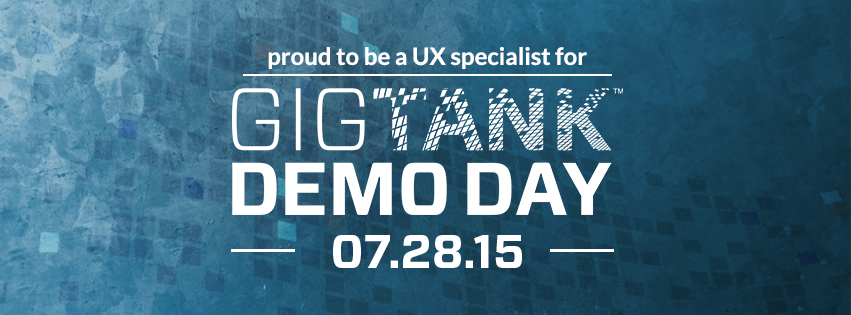
<style>
.page{position:relative;width:851px;height:315px}
.page>*{position:absolute;margin:0}
.t1{font:24px "Lato-Bold";color:#ffffff}
.t2{font:47px "Forza-Bold";color:#ffffff}
</style>
<div class="page">
<p class="t1" style="left:268px;top:47px;width:319px;height:22px">proud to be a UX specialist for</p>
<p class="t2" style="left:333px;top:235px;width:189px;height:33px">07.28.15</p>
</div>
